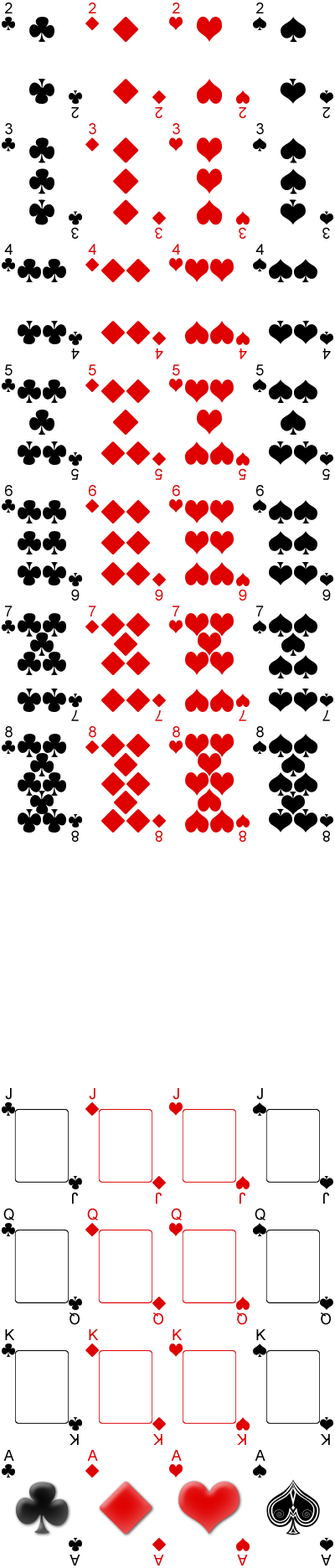
<style>
.page{position:relative;width:335px;height:1568px;background:#ffffff}
.page>*{position:absolute;margin:0}
.t1{font:15.1px "ArialMT";color:#000000}
.t2{font:15.1px "ArialMT";color:#df0000}
</style>
<div class="page">
<p class="t1" style="left:5px;top:3px;width:8px;height:10px">2</p>
<p class="t2" style="left:89px;top:3px;width:7px;height:10px">2</p>
<p class="t2" style="left:173px;top:3px;width:7px;height:10px">2</p>
<p class="t1" style="left:256px;top:3px;width:8px;height:10px">2</p>
<p class="t1" style="left:71px;top:107px;width:8px;height:11px;rotate:180deg">2</p>
<p class="t2" style="left:155px;top:107px;width:7px;height:11px;rotate:180deg">2</p>
<p class="t2" style="left:239px;top:107px;width:7px;height:11px;rotate:180deg">2</p>
<p class="t1" style="left:322px;top:107px;width:8px;height:11px;rotate:180deg">2</p>
<p class="t1" style="left:5px;top:123px;width:8px;height:12px">3</p>
<p class="t2" style="left:89px;top:123px;width:7px;height:12px">3</p>
<p class="t2" style="left:173px;top:123px;width:7px;height:12px">3</p>
<p class="t1" style="left:256px;top:123px;width:8px;height:12px">3</p>
<p class="t1" style="left:71px;top:227px;width:8px;height:12px;rotate:180deg">3</p>
<p class="t2" style="left:155px;top:227px;width:7px;height:12px;rotate:180deg">3</p>
<p class="t2" style="left:239px;top:227px;width:7px;height:12px;rotate:180deg">3</p>
<p class="t1" style="left:322px;top:227px;width:8px;height:12px;rotate:180deg">3</p>
<p class="t1" style="left:4px;top:244px;width:9px;height:11px">4</p>
<p class="t2" style="left:88px;top:244px;width:8px;height:11px">4</p>
<p class="t2" style="left:172px;top:244px;width:8px;height:11px">4</p>
<p class="t1" style="left:255px;top:244px;width:9px;height:11px">4</p>
<p class="t1" style="left:71px;top:348px;width:9px;height:11px;rotate:180deg">4</p>
<p class="t2" style="left:155px;top:348px;width:8px;height:11px;rotate:180deg">4</p>
<p class="t2" style="left:239px;top:348px;width:8px;height:11px;rotate:180deg">4</p>
<p class="t1" style="left:322px;top:348px;width:9px;height:11px;rotate:180deg">4</p>
<p class="t1" style="left:5px;top:364px;width:8px;height:12px">5</p>
<p class="t2" style="left:89px;top:364px;width:7px;height:12px">5</p>
<p class="t2" style="left:173px;top:364px;width:7px;height:12px">5</p>
<p class="t1" style="left:256px;top:364px;width:8px;height:12px">5</p>
<p class="t1" style="left:71px;top:468px;width:8px;height:12px;rotate:180deg">5</p>
<p class="t2" style="left:155px;top:468px;width:7px;height:12px;rotate:180deg">5</p>
<p class="t2" style="left:239px;top:468px;width:7px;height:12px;rotate:180deg">5</p>
<p class="t1" style="left:322px;top:468px;width:8px;height:12px;rotate:180deg">5</p>
<p class="t1" style="left:5px;top:485px;width:8px;height:12px">6</p>
<p class="t2" style="left:89px;top:485px;width:7px;height:12px">6</p>
<p class="t2" style="left:173px;top:485px;width:7px;height:12px">6</p>
<p class="t1" style="left:256px;top:485px;width:8px;height:12px">6</p>
<p class="t1" style="left:71px;top:589px;width:9px;height:12px;rotate:180deg">6</p>
<p class="t2" style="left:155px;top:589px;width:8px;height:12px;rotate:180deg">6</p>
<p class="t2" style="left:239px;top:589px;width:8px;height:12px;rotate:180deg">6</p>
<p class="t1" style="left:322px;top:589px;width:9px;height:12px;rotate:180deg">6</p>
<p class="t1" style="left:5px;top:606px;width:8px;height:10px">7</p>
<p class="t2" style="left:89px;top:606px;width:7px;height:10px">7</p>
<p class="t2" style="left:173px;top:606px;width:7px;height:10px">7</p>
<p class="t1" style="left:256px;top:606px;width:8px;height:10px">7</p>
<p class="t1" style="left:71px;top:710px;width:8px;height:11px;rotate:180deg">7</p>
<p class="t2" style="left:155px;top:710px;width:7px;height:11px;rotate:180deg">7</p>
<p class="t2" style="left:239px;top:710px;width:7px;height:11px;rotate:180deg">7</p>
<p class="t1" style="left:322px;top:710px;width:8px;height:11px;rotate:180deg">7</p>
<p class="t1" style="left:5px;top:726px;width:8px;height:12px">8</p>
<p class="t2" style="left:89px;top:726px;width:7px;height:12px">8</p>
<p class="t2" style="left:173px;top:726px;width:7px;height:12px">8</p>
<p class="t1" style="left:256px;top:726px;width:8px;height:12px">8</p>
<p class="t1" style="left:71px;top:830px;width:8px;height:12px;rotate:180deg">8</p>
<p class="t2" style="left:155px;top:830px;width:7px;height:12px;rotate:180deg">8</p>
<p class="t2" style="left:239px;top:830px;width:7px;height:12px;rotate:180deg">8</p>
<p class="t1" style="left:322px;top:830px;width:8px;height:12px;rotate:180deg">8</p>
<p class="t1" style="left:5px;top:1088px;width:7px;height:12px">J</p>
<p class="t2" style="left:89px;top:1088px;width:6px;height:12px">J</p>
<p class="t2" style="left:173px;top:1088px;width:6px;height:12px">J</p>
<p class="t1" style="left:256px;top:1088px;width:7px;height:12px">J</p>
<p class="t1" style="left:72px;top:1192px;width:6px;height:12px;rotate:180deg">J</p>
<p class="t2" style="left:156px;top:1192px;width:6px;height:12px;rotate:180deg">J</p>
<p class="t2" style="left:240px;top:1192px;width:5px;height:12px;rotate:180deg">J</p>
<p class="t1" style="left:323px;top:1192px;width:6px;height:12px;rotate:180deg">J</p>
<p class="t1" style="left:3px;top:1208px;width:11px;height:12px">Q</p>
<p class="t2" style="left:87px;top:1208px;width:11px;height:12px">Q</p>
<p class="t2" style="left:171px;top:1208px;width:11px;height:12px">Q</p>
<p class="t1" style="left:255px;top:1208px;width:11px;height:12px">Q</p>
<p class="t1" style="left:70px;top:1313px;width:10px;height:12px;rotate:180deg">Q</p>
<p class="t2" style="left:153px;top:1313px;width:10px;height:12px;rotate:180deg">Q</p>
<p class="t2" style="left:237px;top:1313px;width:10px;height:12px;rotate:180deg">Q</p>
<p class="t1" style="left:321px;top:1313px;width:10px;height:12px;rotate:180deg">Q</p>
<p class="t1" style="left:5px;top:1329px;width:10px;height:11px">K</p>
<p class="t2" style="left:89px;top:1329px;width:10px;height:11px">K</p>
<p class="t2" style="left:173px;top:1329px;width:10px;height:11px">K</p>
<p class="t1" style="left:256px;top:1329px;width:10px;height:11px">K</p>
<p class="t1" style="left:70px;top:1434px;width:9px;height:11px;rotate:180deg">K</p>
<p class="t2" style="left:153px;top:1434px;width:9px;height:11px;rotate:180deg">K</p>
<p class="t2" style="left:237px;top:1434px;width:9px;height:11px;rotate:180deg">K</p>
<p class="t1" style="left:321px;top:1434px;width:9px;height:11px;rotate:180deg">K</p>
<p class="t1" style="left:3px;top:1450px;width:11px;height:11px">A</p>
<p class="t2" style="left:87px;top:1450px;width:11px;height:11px">A</p>
<p class="t2" style="left:171px;top:1450px;width:11px;height:11px">A</p>
<p class="t1" style="left:255px;top:1450px;width:11px;height:11px">A</p>
<p class="t1" style="left:70px;top:1555px;width:10px;height:10px;rotate:180deg">A</p>
<p class="t2" style="left:153px;top:1555px;width:11px;height:10px;rotate:180deg">A</p>
<p class="t2" style="left:237px;top:1555px;width:11px;height:10px;rotate:180deg">A</p>
<p class="t1" style="left:321px;top:1555px;width:11px;height:10px;rotate:180deg">A</p>
</div>
